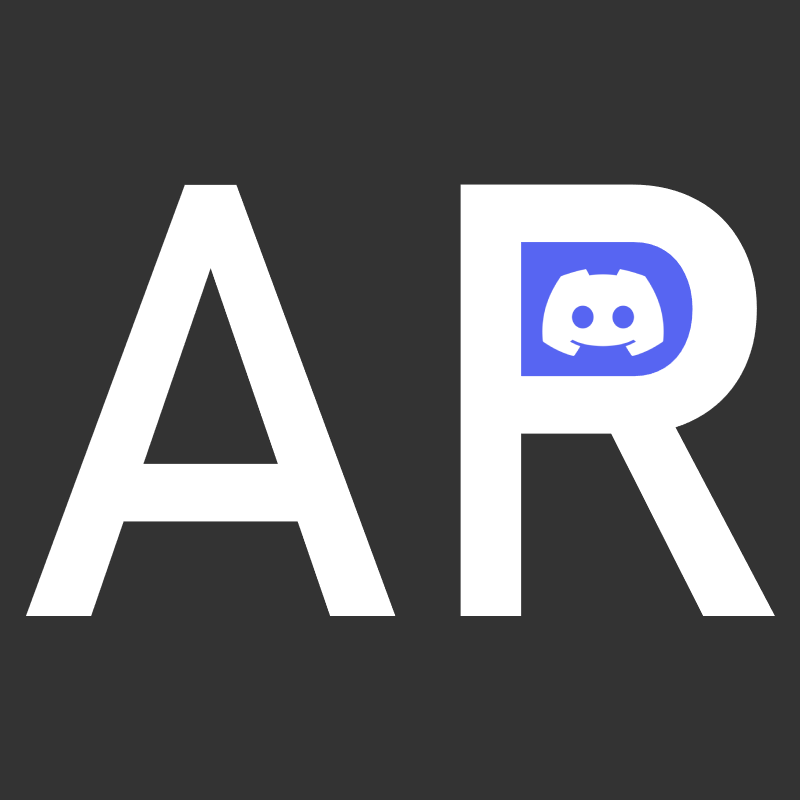
<style>
.page{position:relative;width:800px;height:800px;background:#333333}
.page>*{position:absolute;margin:0}
.t1{font:607.3px "Bahnschrift";color:#ffffff}
</style>
<div class="page">
<p class="t1" style="left:26px;top:184px;width:749px;height:432px">AR</p>
</div>
